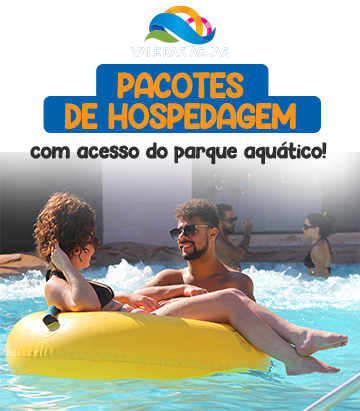
<style>
.page{position:relative;width:360px;height:411px;background:#ffffff}
.page>*{position:absolute;margin:0}
.t1{font:33.9px/30.7px "Hey-Comic";letter-spacing:-0.04em;color:#f7941d;text-transform:uppercase}
.t2{font:21.4px "Hey-Comic";letter-spacing:-0.04em;color:#303030}
</style>
<div class="page">
<p class="t1" style="left:65px;top:72px;width:231px;height:58px;text-align:center">PACOTES<br>DE HOSPEDAGEM</p>
<p class="t2" style="left:30px;top:141px;width:297px;height:24px">com acesso do parque aquático!</p>
</div>
